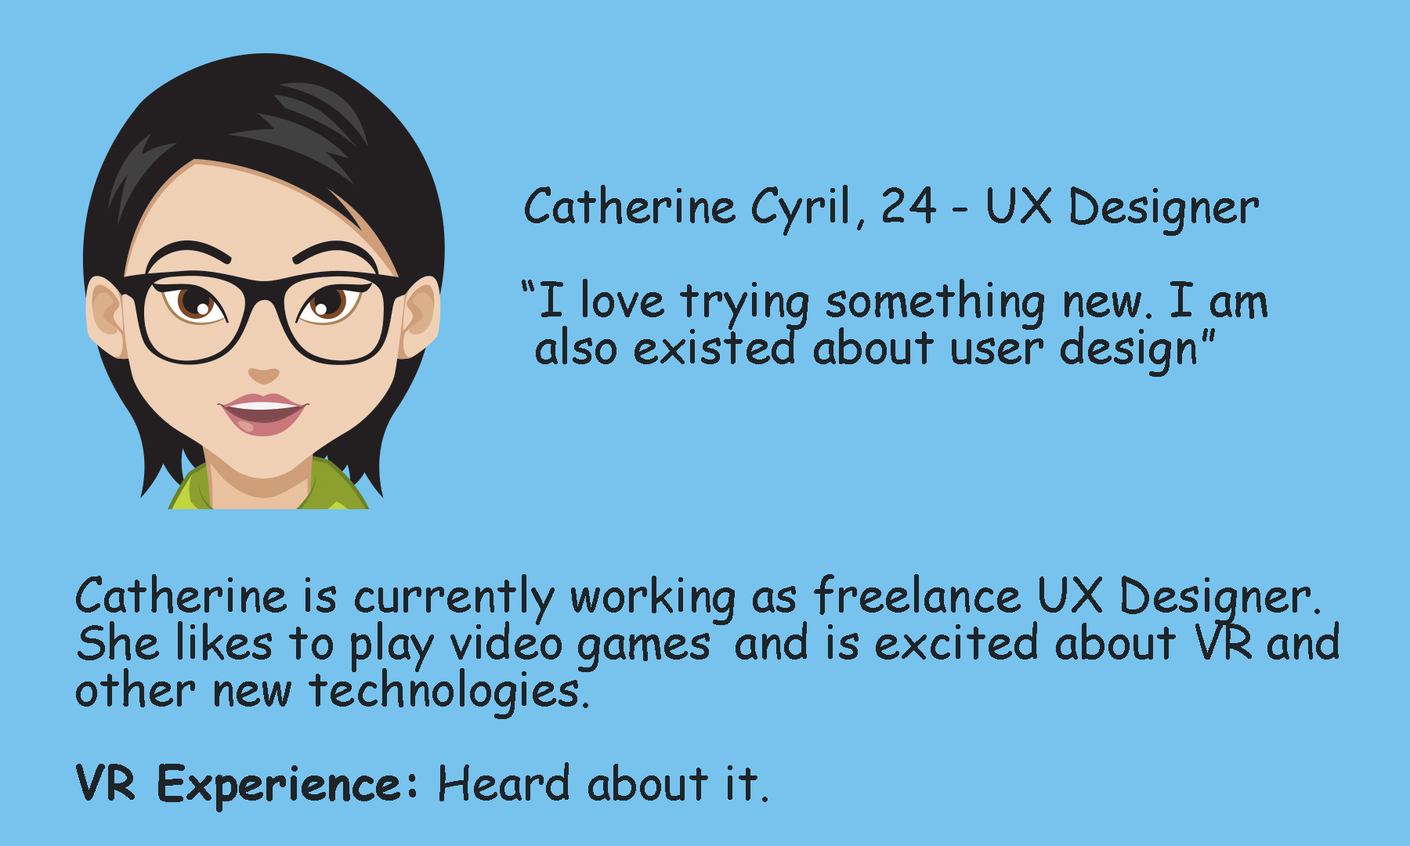
<style>
.page{position:relative;width:1410px;height:846px;background:#77c3ee}
.page>*{position:absolute;margin:0}
.t1{font:47px/47px "ComicSansMS";color:#1e2428}
.t2{font:47px/47px "ComicSansMS-Bold";color:#1e2428}
</style>
<div class="page">
<p class="t1" style="left:522px;top:185px;width:745px;height:192px">Catherine Cyril, 24 - UX Designer<br><br>“I love trying something new. I am<br> also existed about user design”</p>
<p class="t1" style="left:76px;top:574px;width:1262px;height:238px">Catherine is currently working as freelance UX Designer.<br>She likes to play video games  and is excited about VR and <br>other new technologies.<br><br><span class="t2">VR Experience:</span> Heard about it.</p>
</div>
